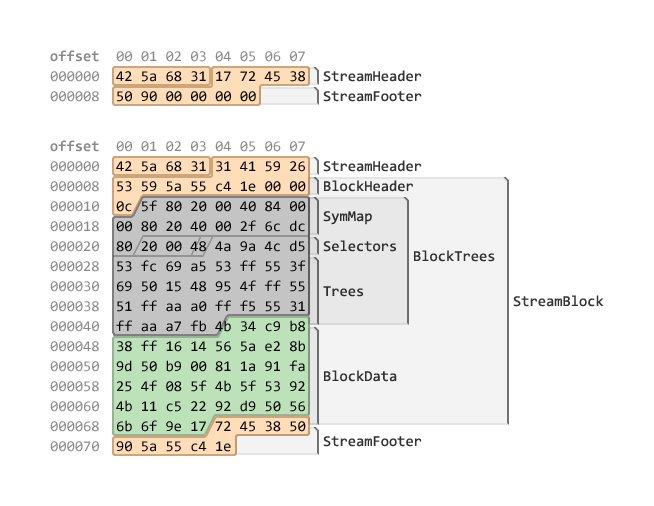
<style>
.page{position:relative;width:654px;height:506px;background:#ffffff}
.page>*{position:absolute;margin:0}
.t1{font:15px/20px "Consolas";color:#898989}
.t2{font:15px/20px "Consolas-Bold";color:#898989}
.t3{font:15px/20px "Consolas";color:#000000}
.t4{font:15px/20px "Consolas";color:#333333}
.t5{font:15px/5px "Consolas";color:#313131}
.t6{font:15px "Consolas";color:#313131}
.t7{font:15px "Consolas";color:#333333}
</style>
<div class="page">
<p class="t1" style="left:50px;top:50px;width:255px;height:52px"><span class="t2">offset</span>  00 01 02 03 04 05 06 07<br>000000<br>000008</p>
<p class="t3" style="left:116px;top:71px;width:189px;height:31px">42 5a 68 31 17 72 45 38<br>        50 90 00 00 00 00</p>
<p class="t4" style="left:323px;top:70px;width:99px;height:32px">StreamHeader<br>StreamFooter</p>
<p class="t3" style="left:116px;top:161px;width:190px;height:291px">42 5a 68 31 31 41 59 26<br>        53 59 5a 55 c4 1e 00 00<br>        0c 5f 80 20 00 40 84 00<br>        00 80 20 40 00 2f 6c dc<br>        80 20 00 48 4a 9a 4c d5<br>        53 fc 69 a5 53 ff 55 3f<br>        69 50 15 48 95 4f ff 55<br>        51 ff aa a0 ff f5 55 31<br>        ff aa a7 fb 4b 34 c9 b8<br>        38 ff 16 14 56 5a e2 8b<br>        9d 50 b9 00 81 1a 91 fa<br>        25 4f 08 5f 4b 5f 53 92<br>        4b 11 c5 22 92 d9 50 56<br>        6b 6f 9e 17 72 45 38 50<br>        90 5a 55 c4 1e</p>
<p class="t5" style="left:323px;top:160px;width:99px;height:287px">StreamHeader<br><br><br><br>BlockHeader<br><br><br><br><br><br>SymMap<br><br><br><br><br><br>Selectors<br><br><br><br><br><br><br><br><br>Trees<br><br><br><br><br><br><br><br><br><br><br><br><br><br><br><br><br>BlockData<br><br><br><br><br><br><br><br><br><br><br><br><br>StreamFooter</p>
<p class="t6" style="left:414px;top:250px;width:81px;height:12px">BlockTrees</p>
<p class="t7" style="left:513px;top:295px;width:91px;height:12px">StreamBlock</p>
</div>
